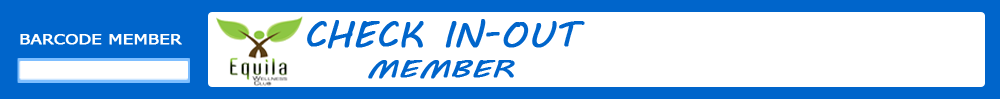
<style>
.page{position:relative;width:1000px;height:99px;background:#ffffff}
.page>*{position:absolute;margin:0}
.t1{font:36px "MVBoli";color:#0065cb;font-weight:bold}
.t2{font:14.3px "Tahoma";color:#ffffff;font-weight:bold;scale:1.27 1}
.t3{font:23.9px "MVBoli";color:#0065cb;font-weight:bold;scale:1.37 1}
</style>
<div class="page">
<p class="t1" style="left:307px;top:19px;width:278px;height:30px">CHECK IN-OUT</p>
<p class="t2" style="left:20px;top:34px;width:162px;height:11px">BARCODE MEMBER</p>
<p class="t3" style="left:368px;top:60px;width:147px;height:19px">MEMBER</p>
</div>
